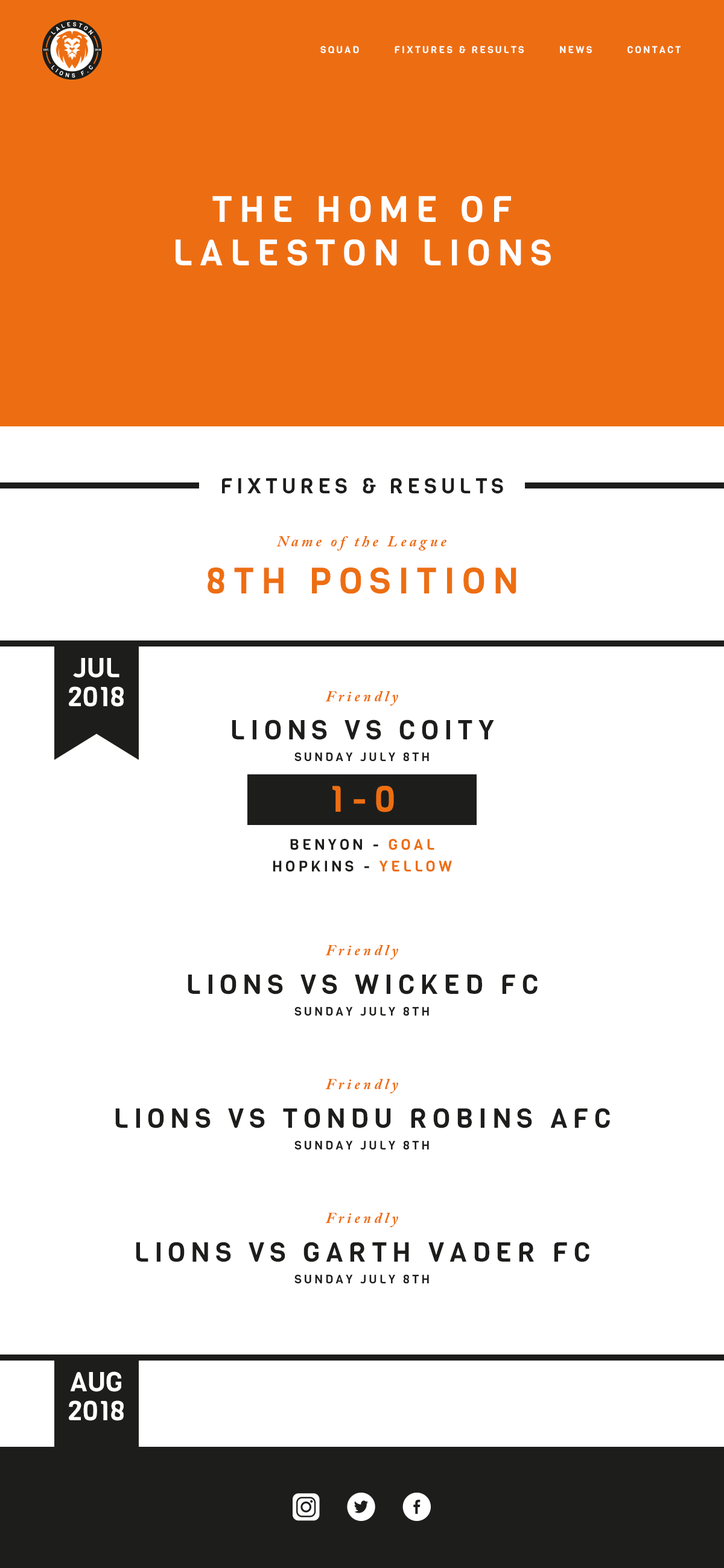
<style>
.page{position:relative;width:724px;height:1568px;background:#ffffff}
.page>*{position:absolute;margin:0}
.t1{font:9.6px "Viga-Regular";letter-spacing:0.2em;color:#ffffff;text-transform:uppercase}
.t2{font:36.2px "Viga-Regular";letter-spacing:0.2em;color:#ffffff}
.t3{font:21.1px "Viga-Regular";letter-spacing:0.2em;color:#1d1e1c}
.t4{font:15.1px "ACaslonPro-BoldItalic";letter-spacing:0.2em;color:#ed6e12}
.t5{font:36.2px "Viga-Regular";letter-spacing:0.2em;color:#ed6e12}
.t6{font:27.1px/28.9px "Viga-Regular";color:#ffffff}
.t7{font:12.1px/21.7px "Viga-Regular";letter-spacing:0.2em;color:#1d1e1c}
.t8{font:27.1px "Viga-Regular";letter-spacing:0.2em;color:#1d1e1c}
.t9{font:15.1px/21.7px "Viga-Regular";letter-spacing:0.2em;color:#1d1e1c}
.t10{font:15.1px/21.7px "Viga-Regular";letter-spacing:0.2em;color:#ed6e12}
</style>
<div class="page">
<p class="t1" style="left:320px;top:46px;width:360px;height:8px">SQUAD        FIXTURES &amp; RESULTS        NEWS        CONTACT</p>
<p class="t2" style="left:175px;top:196px;width:376px;height:70px;text-align:center">THE HOME OF <br>LALESTON LIONS</p>
<p class="t3" style="left:222px;top:478px;width:281px;height:16px">FIXTURES &amp; RESULTS</p>
<p class="t4" style="left:276px;top:536px;width:170px;height:15px">Name of the League</p>
<p class="t5" style="left:207px;top:567px;width:309px;height:27px">8TH POSITION</p>
<p class="t6" style="left:69px;top:658px;width:55px;height:49px;text-align:center">JUL<br>2018</p>
<p class="t4" style="left:325px;top:691px;width:73px;height:15px">Friendly</p>
<p class="t7" style="left:232px;top:719px;width:262px;height:43px;text-align:center"><span class="t8">LIONS VS COITY<br></span>SUNDAY JULY 8TH</p>
<p class="t5" style="left:332px;top:786px;width:62px;height:26px">1-0</p>
<p class="t9" style="left:273px;top:839px;width:179px;height:33px;text-align:center">BENYON - <span class="t10">GOAL<br></span>HOPKINS - <span class="t10">YELLOW</span></p>
<p class="t4" style="left:325px;top:945px;width:73px;height:14px">Friendly</p>
<p class="t8" style="left:188px;top:974px;width:349px;height:42px;text-align:center">LIONS VS WICKED FC<br><span class="t7">SUNDAY JULY 8TH</span></p>
<p class="t4" style="left:325px;top:1079px;width:73px;height:14px">Friendly</p>
<p class="t8" style="left:115px;top:1108px;width:495px;height:42px;text-align:center">LIONS VS TONDU ROBINS AFC<br><span class="t7">SUNDAY JULY 8TH</span></p>
<p class="t4" style="left:325px;top:1213px;width:73px;height:14px">Friendly</p>
<p class="t8" style="left:136px;top:1242px;width:453px;height:42px;text-align:center">LIONS VS GARTH VADER FC<br><span class="t7">SUNDAY JULY 8TH</span></p>
<p class="t6" style="left:69px;top:1371px;width:55px;height:50px;text-align:center">AUG<br>2018</p>
</div>
